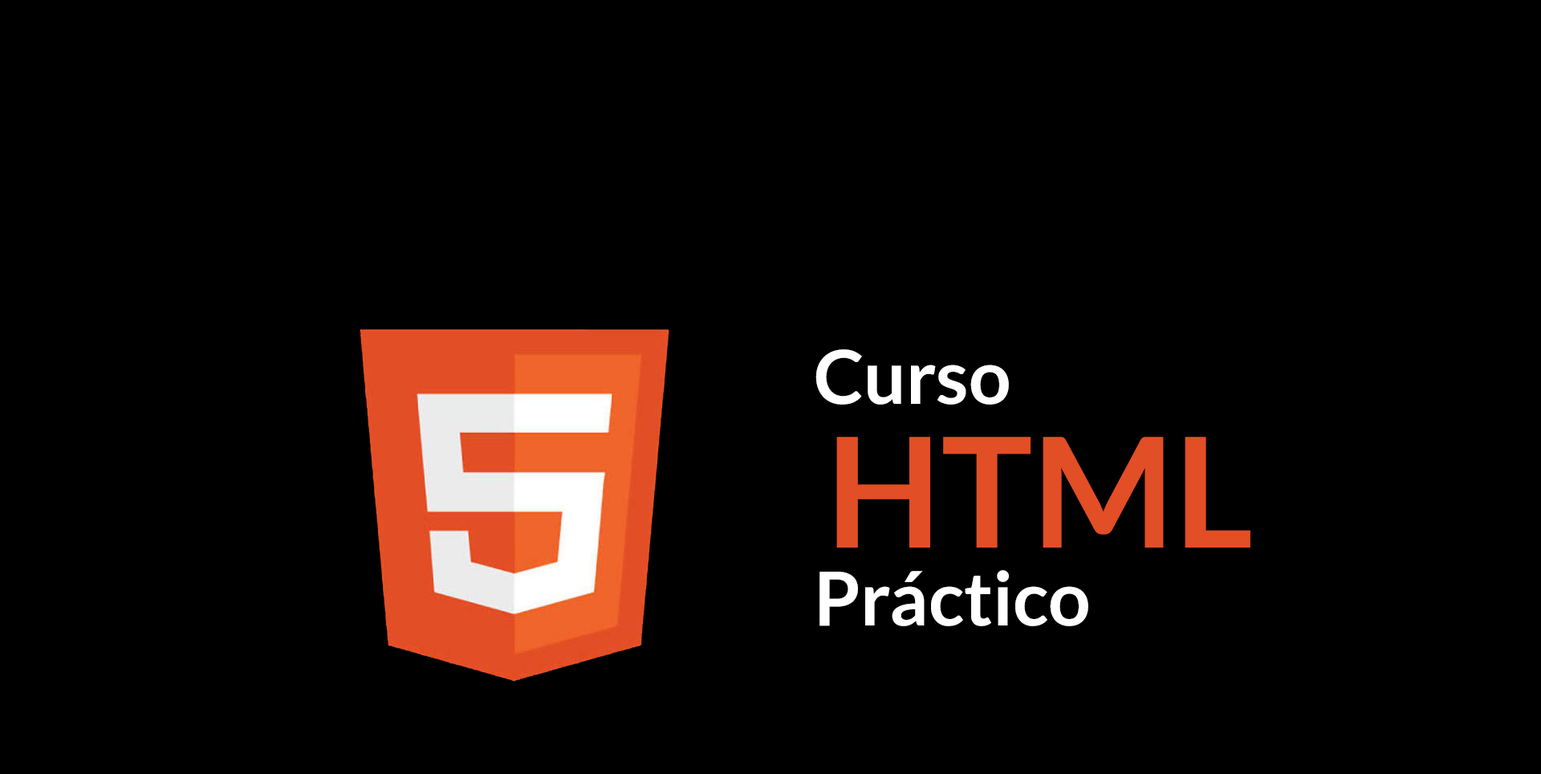
<style>
.page{position:relative;width:1541px;height:774px;background:#000000}
.page>*{position:absolute;margin:0}
.t1{font:74.3px "Lato-Bold";color:#ffffff}
.t2{font:152.8px "Lato-Bold";color:#e24e26}
</style>
<div class="page">
<p class="t1" style="left:815px;top:349px;width:194px;height:56px">Curso</p>
<p class="t2" style="left:836px;top:437px;width:415px;height:110px">HTML</p>
<p class="t1" style="left:820px;top:570px;width:268px;height:56px">Práctico</p>
</div>
